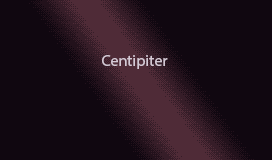
<style>
.page{position:relative;width:272px;height:160px;background:#100710}
.page>*{position:absolute;margin:0}
.t1{font:16px "MyriadPro-Regular";color:#d5c9d5}
</style>
<div class="page">
<p class="t1" style="left:102px;top:55px;width:66px;height:14px">Centipiter</p>
</div>
